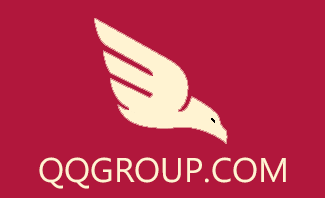
<style>
.page{position:relative;width:325px;height:198px;background:#b1173c}
.page>*{position:absolute;margin:0}
.t1{font:34.3px "MicrosoftPhagsPa";color:#fff3d2}
</style>
<div class="page">
<p class="t1" style="left:39px;top:157px;width:247px;height:32px">QQGROUP.COM</p>
</div>
